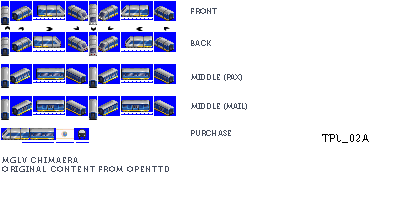
<style>
.page{position:relative;width:400px;height:217px;background:#ffffff}
.page>*{position:absolute;margin:0}
.t1{font:8px "Museo700-Regular";color:#444c5c;text-transform:uppercase}
.t2{font:10px "Museo700-Regular";letter-spacing:0.075em;color:#000000;text-transform:uppercase}
.t3{font:8px "Museo700-Regular";letter-spacing:0.1em;color:#444c5c;text-transform:uppercase}
</style>
<div class="page">
<p class="t1" style="left:191px;top:8px;width:26px;height:6px">Front</p>
<p class="t1" style="left:191px;top:40px;width:20px;height:6px">Back</p>
<p class="t1" style="left:191px;top:74px;width:51px;height:7px">Middle (PAX)</p>
<p class="t1" style="left:191px;top:103px;width:56px;height:7px">Middle (MAIL)</p>
<p class="t1" style="left:191px;top:130px;width:40px;height:6px">Purchase</p>
<p class="t2" style="left:322px;top:134px;width:47px;height:9px">TPL_02A</p>
<p class="t3" style="left:2px;top:157px;width:167px;height:15px">mglv Chimaera<br>original content from openttd</p>
</div>
